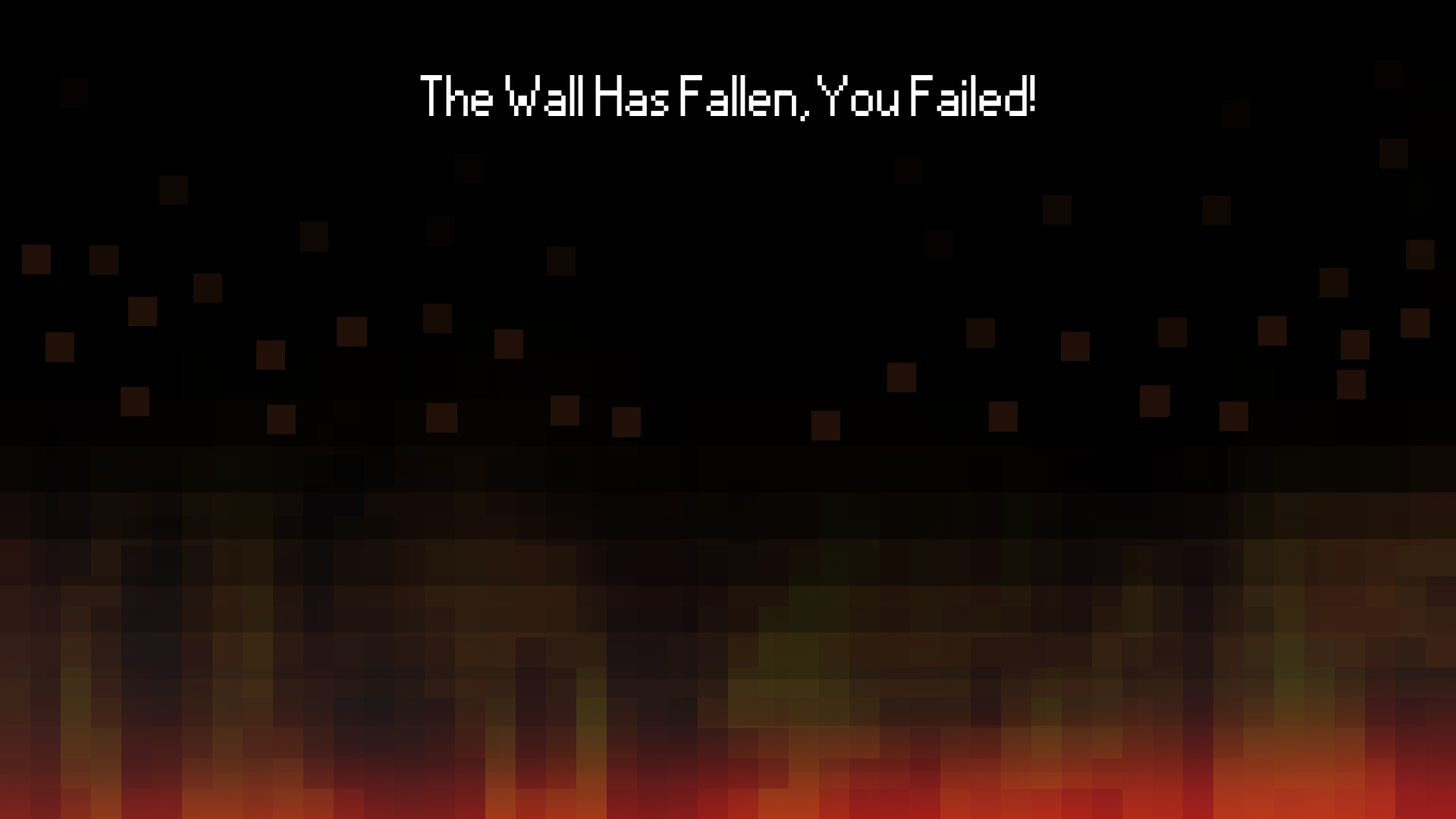
<style>
.page{position:relative;width:1456px;height:819px;background:#000000}
.page>*{position:absolute;margin:0}
.t1{font:54.6px "Small Fonts";color:#ffffff}
</style>
<div class="page">
<p class="t1" style="left:420px;top:75px;width:615px;height:46px">The Wall Has Fallen, You Failed!</p>
</div>
